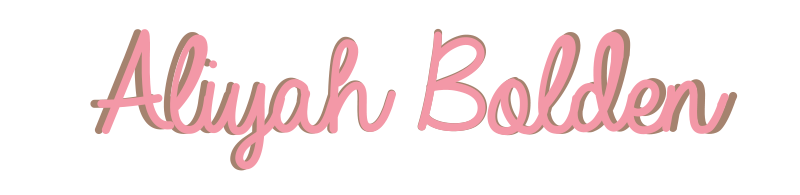
<style>
.page{position:relative;width:800px;height:195px;background:#ffffff}
.page>*{position:absolute;margin:0}
.t1{font:148px "AlwaysInMyHeart"}
.t2{font:144px "AlwaysInMyHeart";color:#f398a7}
.t3{font:148px "AlwaysInMyHeart";color:#f398a7}
</style>
<div class="page">
<p class="t1" style="left:90px;top:28px;width:648px;height:143px">Aliyah Bolden</p>
<p class="t2" style="left:97px;top:29px;width:632px;height:141px"><span class="t3">A</span>liyah Bolden</p>
</div>
